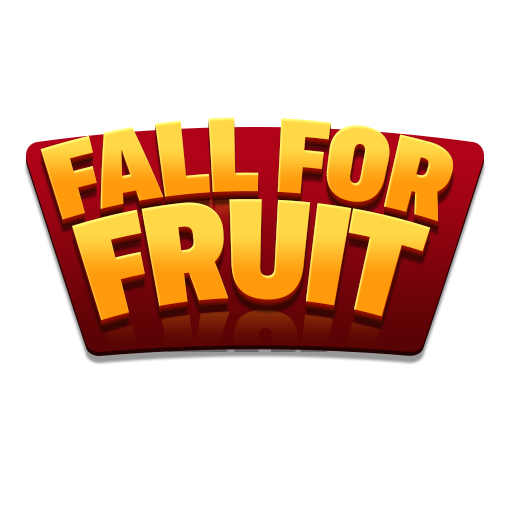
<style>
.page{position:relative;width:512px;height:512px;background:#ffffff}
.page>*{position:absolute;margin:0}
.t1{font:98.8px "AsketCondensed-ExtraBold";letter-spacing:-0.05em;text-transform:uppercase}
.t2{font:131.7px "AsketCondensed-ExtraBold";letter-spacing:-0.05em;text-transform:uppercase;scale:0.89 1}
</style>
<div class="page">
<p class="t1" style="left:40px;top:117px;width:414px;height:105px">Fall For</p>
<p class="t2" style="left:72px;top:199px;width:359px;height:122px">Fruit</p>
</div>
